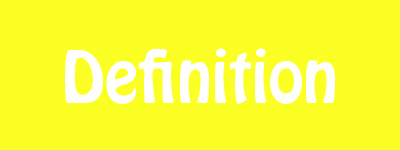
<style>
.page{position:relative;width:400px;height:150px;background:#fcff24}
.page>*{position:absolute;margin:0}
.t1{font:63.7px "HoboStd";color:#ffffff}
</style>
<div class="page">
<p class="t1" style="left:65px;top:48px;width:270px;height:56px">Definition</p>
</div>
